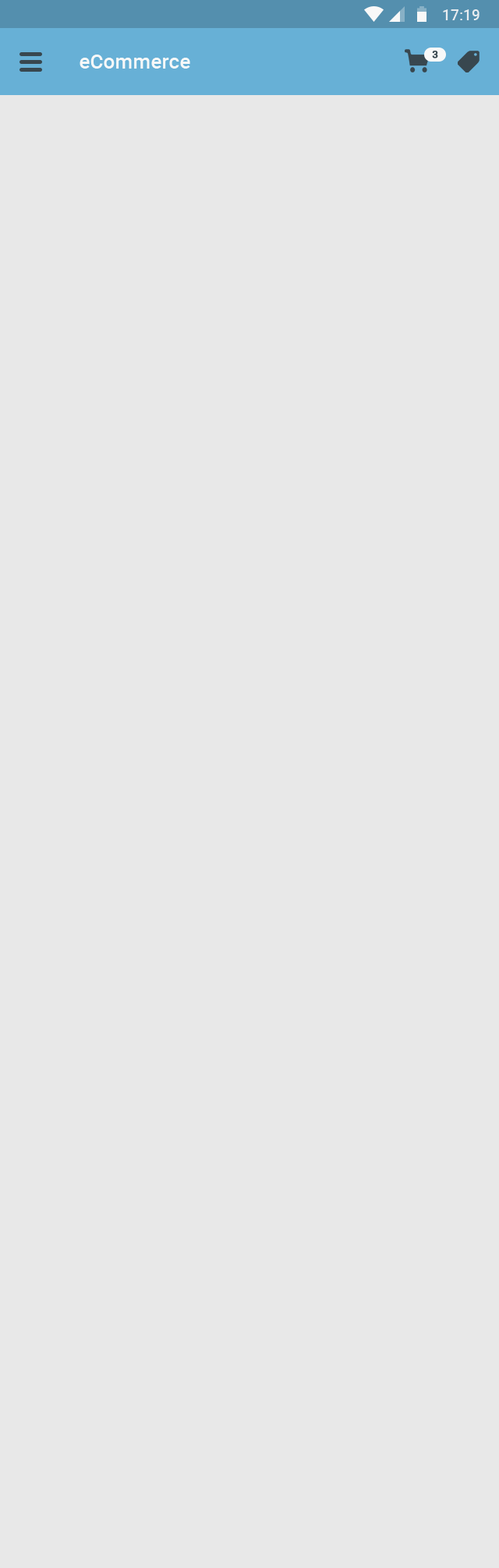
<style>
.page{position:relative;width:499px;height:1568px;background:#e8e8e8}
.page>*{position:absolute;margin:0}
.t1{font:14.8px "Roboto-Medium";color:#e8ecf0}
.t2{font:10.1px "Roboto-Medium";letter-spacing:0.04em;color:#38474f;text-transform:uppercase;font-weight:bold}
.t3{font:20.3px "Roboto-Medium";color:#f8f8f8}
</style>
<div class="page">
<p class="t1" style="left:443px;top:9px;width:36px;height:11px">17:19</p>
<p class="t2" style="left:432px;top:51px;width:6px;height:7px">3</p>
<p class="t3" style="left:79px;top:55px;width:111px;height:14px">eCommerce</p>
</div>
